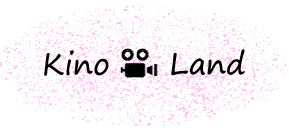
<style>
.page{position:relative;width:289px;height:131px;background:#ffffff}
.page>*{position:absolute;margin:0}
.t1{font:30px "SegoePrint";color:#000000}
</style>
<div class="page">
<p class="t1" style="left:44px;top:50px;width:65px;height:26px">Kino</p>
<p class="t1" style="left:171px;top:49px;width:74px;height:27px">Land</p>
</div>
